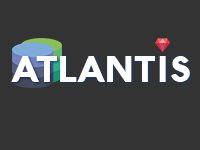
<style>
.page{position:relative;width:200px;height:150px;background:#333333}
.page>*{position:absolute;margin:0}
.t1{font:36px "Aquawax-Black";color:#ffffff;text-transform:uppercase}
</style>
<div class="page">
<p class="t1" style="left:11px;top:56px;width:179px;height:26px">atlantis</p>
</div>
